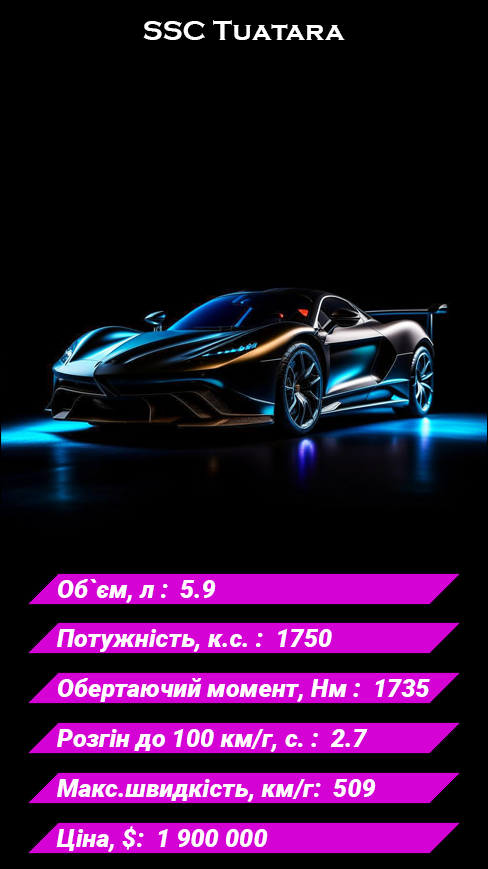
<style>
.page{position:relative;width:488px;height:869px;background:#000000}
.page>*{position:absolute;margin:0}
.t1{font:28px "CopperplateGothic-Bold";color:#ffffff}
.t2{font:25px "Roboto-BlackItalic";color:#ffffff}
</style>
<div class="page">
<p class="t1" style="left:143px;top:20px;width:202px;height:20px">SSC Tuatara</p>
<p class="t2" style="left:58px;top:579px;width:158px;height:24px">Об`єм, л :  5.9</p>
<p class="t2" style="left:57px;top:629px;width:275px;height:23px">Потужність, к.с. :  1750</p>
<p class="t2" style="left:58px;top:678px;width:372px;height:24px">Обертаючий момент, Нм :  1735</p>
<p class="t2" style="left:57px;top:729px;width:311px;height:23px">Розгін до 100 км/г, с. :  2.7</p>
<p class="t2" style="left:57px;top:779px;width:319px;height:23px">Макс.швидкість, км/г:  509</p>
<p class="t2" style="left:56px;top:826px;width:212px;height:26px">Ціна, $:  1 900 000</p>
</div>
